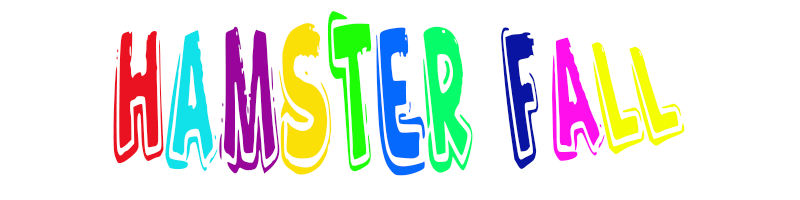
<style>
.page{position:relative;width:800px;height:200px;background:#ffffff}
.page>*{position:absolute;margin:0}
.t1{font:85px "FunnyKid";color:#f4fd02}
.t2{font:85px "FunnyKid";color:#010101}
.t3{font:85px "FunnyKid";color:#ea1120}
.t4{font:85px "FunnyKid";color:#11e2ea}
.t5{font:85px "FunnyKid";color:#99049b}
.t6{font:85px "FunnyKid";color:#fae006}
.t7{font:85px "FunnyKid";color:#1dfd06}
.t8{font:85px "FunnyKid";color:#0669fd}
.t9{font:85px "FunnyKid";color:#06fd69}
.t10{font:85px "FunnyKid";color:#0914a2}
.t11{font:85px "FunnyKid";color:#ff0feb}
</style>
<div class="page">
<p class="t1" style="left:113px;top:11px;width:572px;height:165px;text-align:center"><span class="t2">          </span><span class="t3">h</span><span class="t4">a</span><span class="t5">m</span><span class="t6">s</span><span class="t7">t</span><span class="t8">e</span><span class="t9">r </span><span class="t10">f</span><span class="t11">a</span>ll</p>
</div>
